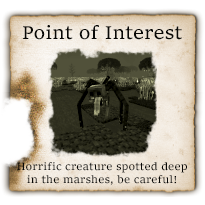
<style>
.page{position:relative;width:205px;height:205px}
.page>*{position:absolute;margin:0}
.t1{font:19.4px "Sitka-Small";color:#080806}
.t2{font:11.1px "Sitka-Small";color:#080806}
</style>
<div class="page">
<p class="t1" style="left:23px;top:25px;width:159px;height:15px">Point of Interest</p>
<p class="t2" style="left:17px;top:162px;width:170px;height:23px;text-align:center">Horrific creature spotted deep in the marshes, be careful!</p>
</div>
